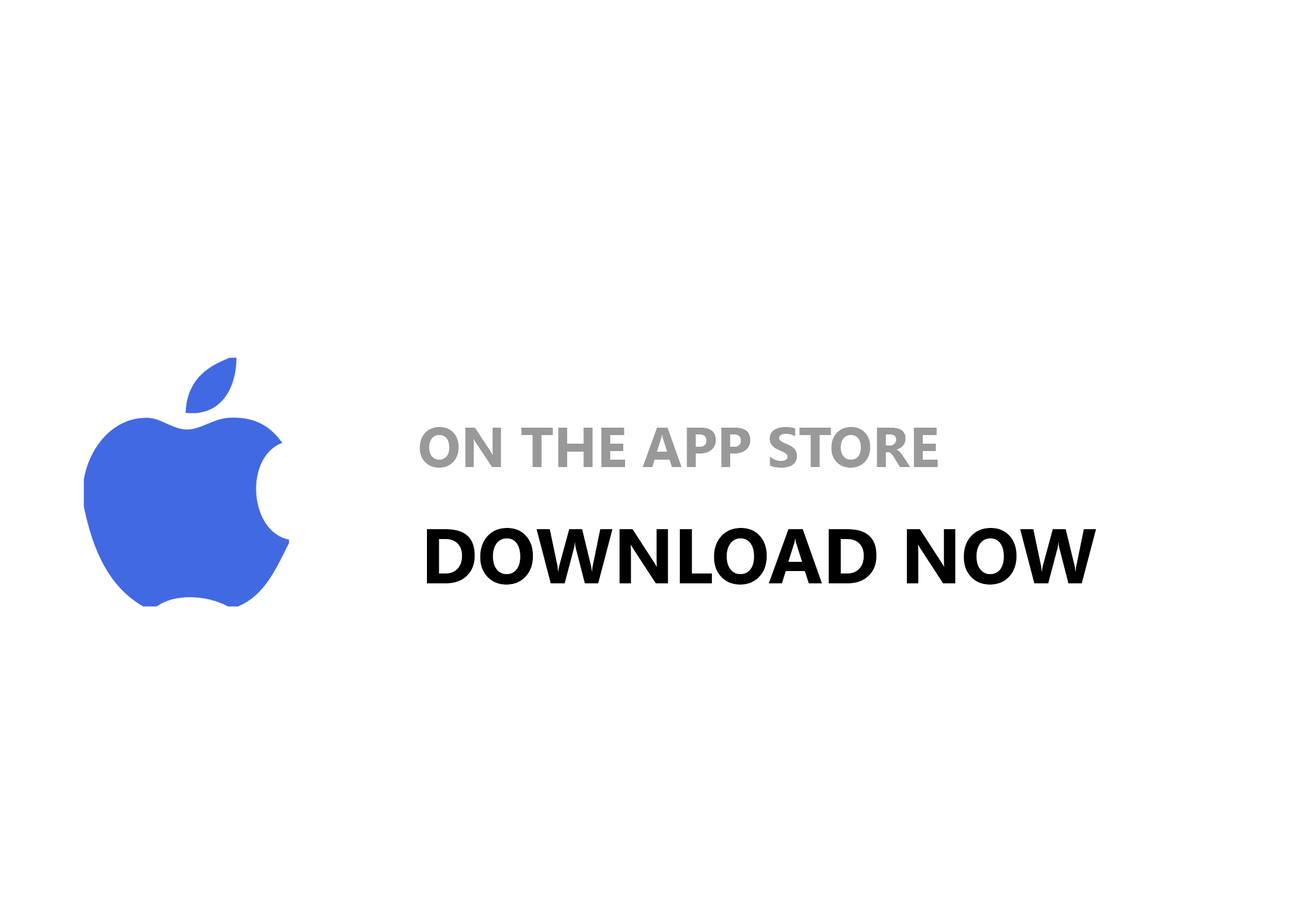
<style>
.page{position:relative;width:1292px;height:923px;background:#ffffff}
.page>*{position:absolute;margin:0}
.t1{font:56.4px "SegoeUI-Bold";color:#999999}
.t2{font:76.9px "SegoeUI-Bold";color:#000000}
</style>
<div class="page">
<p class="t1" style="left:420px;top:427px;width:518px;height:41px">ON THE APP STORE</p>
<p class="t2" style="left:426px;top:528px;width:670px;height:57px">DOWNLOAD NOW</p>
</div>
